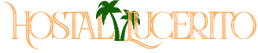
<style>
.page{position:relative;width:258px;height:53px;background:#ffffff}
.page>*{position:absolute;margin:0}
.t1{font:48px "Queen-Inline-Grunge";letter-spacing:-0.08em;color:#ffaf62}
</style>
<div class="page">
<p class="t1" style="left:3px;top:1px;width:111px;height:49px">Hostal</p>
<p class="t1" style="left:124px;top:11px;width:133px;height:38px">Lucerito</p>
</div>
